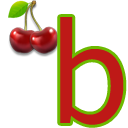
<style>
.page{position:relative;width:128px;height:128px;background:#ffffff}
.page>*{position:absolute;margin:0}
.t1{font:132.9px "SourceHanSansCN-Regular";color:#be1917}
</style>
<div class="page">
<p class="t1" style="left:60px;top:17px;width:64px;height:108px">b</p>
</div>
